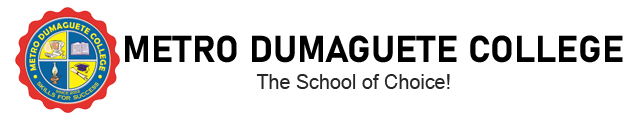
<style>
.page{position:relative;width:626px;height:120px;background:#ffffff}
.page>*{position:absolute;margin:0}
.t1{font:37px "Bahnschrift-Bold";color:#000000}
.t2{font:21px "ArialNarrow";color:#262626;scale:1.15 1}
</style>
<div class="page">
<p class="t1" style="left:125px;top:35px;width:498px;height:28px">METRO DUMAGUETE COLLEGE</p>
<p class="t2" style="left:256px;top:74px;width:194px;height:15px">The School of Choice!</p>
</div>
